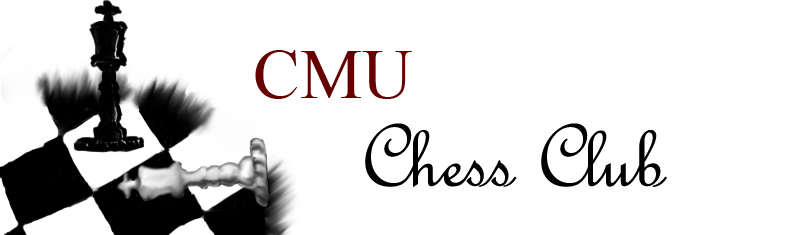
<style>
.page{position:relative;width:800px;height:235px;background:#ffffff}
.page>*{position:absolute;margin:0}
.t1{font:70px "TimesNewRomanPSMT";color:#660000}
.t2{font:95px "FrenchScriptMT";color:#000000}
</style>
<div class="page">
<p class="t1" style="left:255px;top:50px;width:157px;height:49px">CMU</p>
<p class="t2" style="left:365px;top:123px;width:302px;height:64px">Chess Club</p>
</div>
